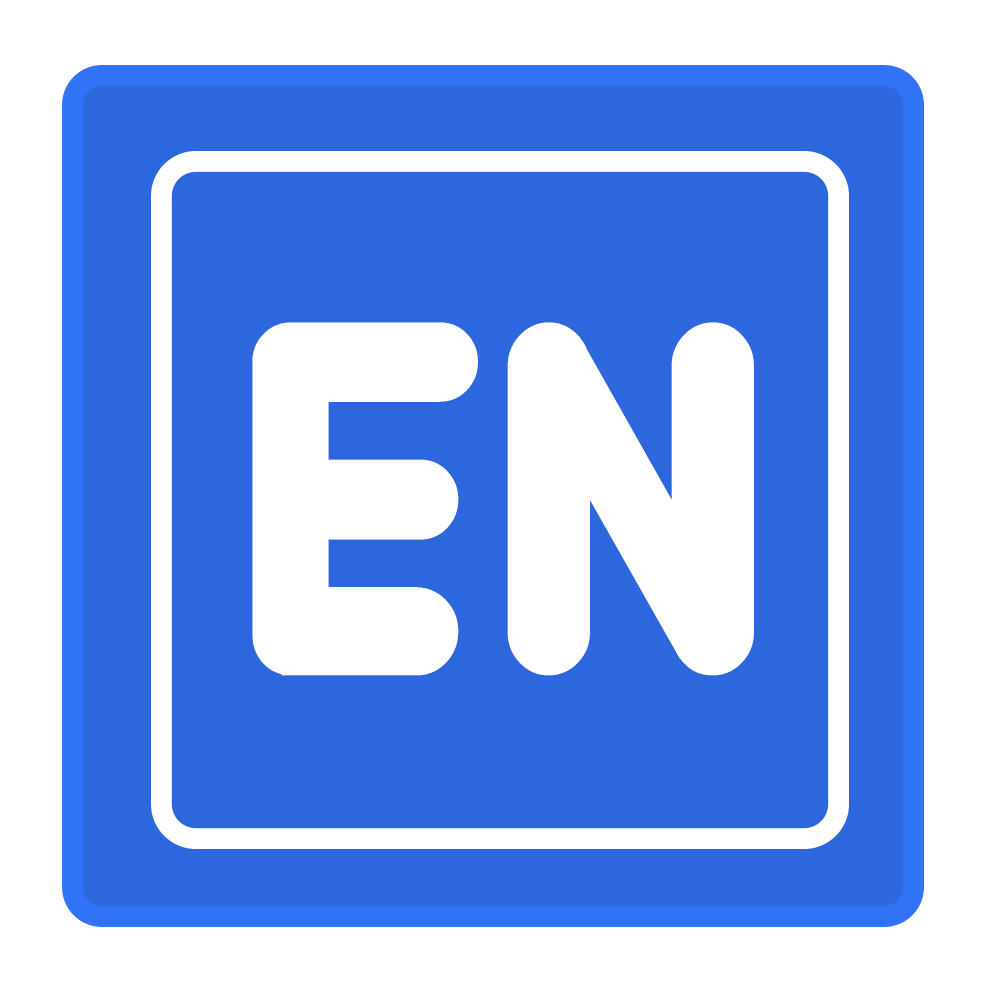
<style>
.page{position:relative;width:1000px;height:1000px;background:#2d67dd}
.page>*{position:absolute;margin:0}
.t1{font:350.1px "Crewniverse";letter-spacing:0.02em;color:#ffffff;font-weight:bold;scale:0.95 1}
</style>
<div class="page">
<p class="t1" style="left:252px;top:322px;width:502px;height:354px">enn</p>
</div>
